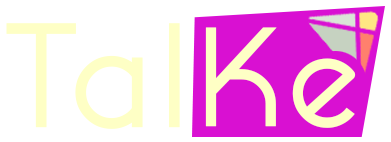
<style>
.page{position:relative;width:391px;height:142px;background:#ffffff}
.page>*{position:absolute;margin:0}
.t1{font:135.6px "PrestijDemo";letter-spacing:0.01em;color:#feffc5;font-weight:bold}
.t2{font:135.6px "PrestijDemo";letter-spacing:0.01em;color:#feffc5;text-transform:uppercase;font-weight:bold}
.t3{font:128.6px "PrestijDemo";letter-spacing:0.01em;color:#feffc4;font-weight:bold}
</style>
<div class="page">
<p class="t1" style="left:6px;top:23px;width:174px;height:106px"><span class="t2">t</span>al</p>
<p class="t3" style="left:205px;top:27px;width:151px;height:101px">Ke</p>
</div>
